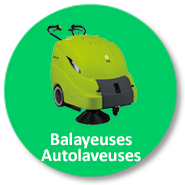
<style>
.page{position:relative;width:185px;height:185px;background:#00cc66}
.page>*{position:absolute;margin:0}
.t1{font:18px/16px "Calibri-Bold";color:#ffffff}
</style>
<div class="page">
<p class="t1" style="left:41px;top:132px;width:100px;height:30px;text-align:center">Balayeuses<br>Autolaveuses</p>
</div>
